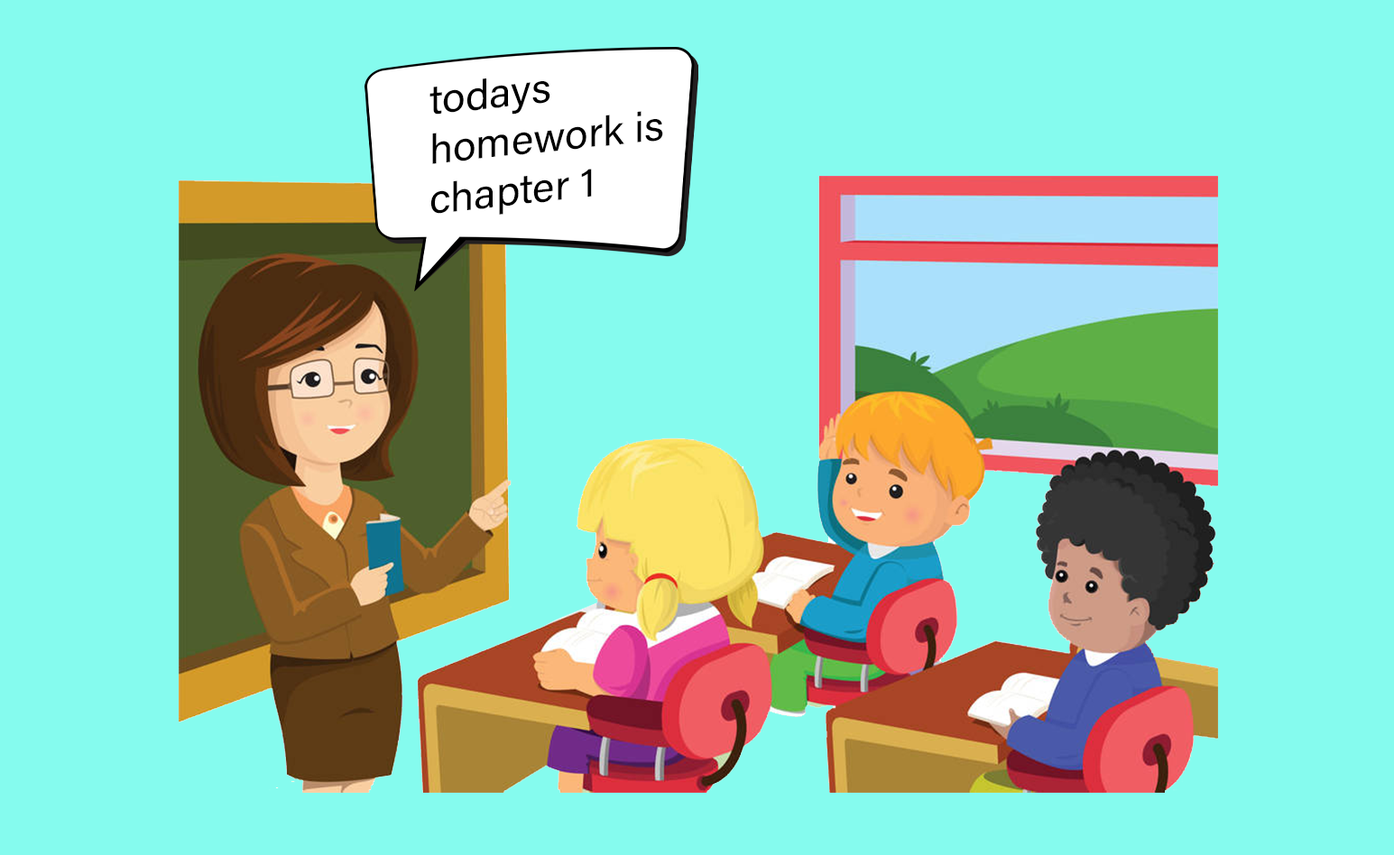
<style>
.page{position:relative;width:1394px;height:855px;background:#85fbee}
.page>*{position:absolute;margin:0}
.t1{font:41.4px "AcuminConcept-Regular";color:#000000}
</style>
<div class="page">
<p class="t1" style="left:429px;top:78px;width:234px;height:137px;rotate:-6deg">todays homework is chapter 1</p>
</div>
